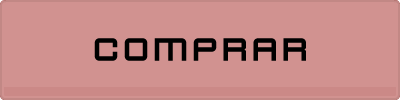
<style>
.page{position:relative;width:400px;height:100px;background:#d19290}
.page>*{position:absolute;margin:0}
.t1{font:36px "KenVector-Future";color:#000000}
</style>
<div class="page">
<p class="t1" style="left:94px;top:38px;width:212px;height:23px">comprar</p>
</div>
